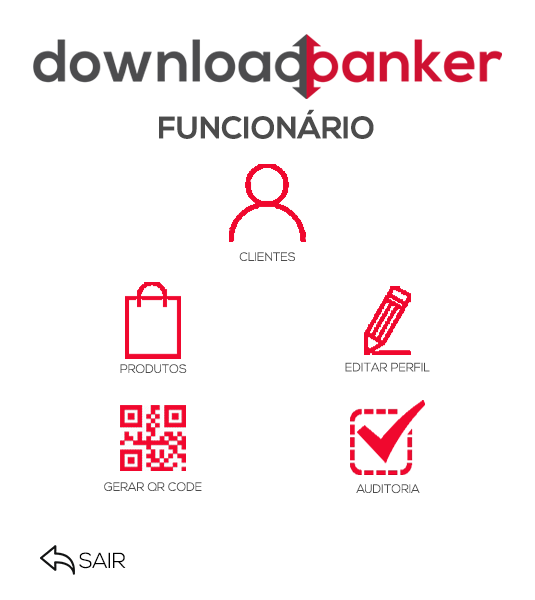
<style>
.page{position:relative;width:535px;height:600px;background:#ffffff}
.page>*{position:absolute;margin:0}
.t1{font:31px "NexaBold";color:#4c4c4c}
.t2{font:12px "NexaLight";color:#4c4c4c}
.t3{font:21.4px "NexaLight";color:#000000}
</style>
<div class="page">
<p class="t1" style="left:159px;top:109px;width:215px;height:30px">FUNCIONÁRIO</p>
<p class="t2" style="left:239px;top:252px;width:56px;height:9px">CLIENTES</p>
<p class="t2" style="left:120px;top:364px;width:67px;height:10px">PRODUTOS</p>
<p class="t2" style="left:345px;top:362px;width:85px;height:10px">EDITAR PERFIL</p>
<p class="t2" style="left:104px;top:482px;width:98px;height:10px">GERAR QR CODE</p>
<p class="t2" style="left:356px;top:484px;width:64px;height:10px">AUDITORIA</p>
<p class="t3" style="left:79px;top:552px;width:47px;height:17px">SAIR</p>
</div>
